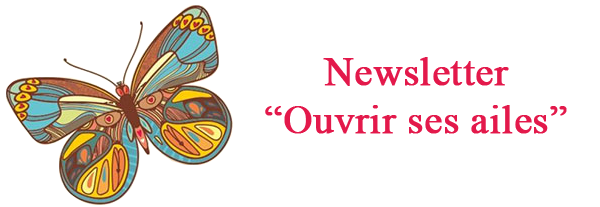
<style>
.page{position:relative;width:600px;height:207px;background:#ffffff}
.page>*{position:absolute;margin:0}
.t1{font:40px "TimesNewRomanPSMT";color:#e3194b;font-weight:bold}
</style>
<div class="page">
<p class="t1" style="left:265px;top:57px;width:302px;height:77px;text-align:center">Newsletter<br>“Ouvrir ses ailes”</p>
</div>
